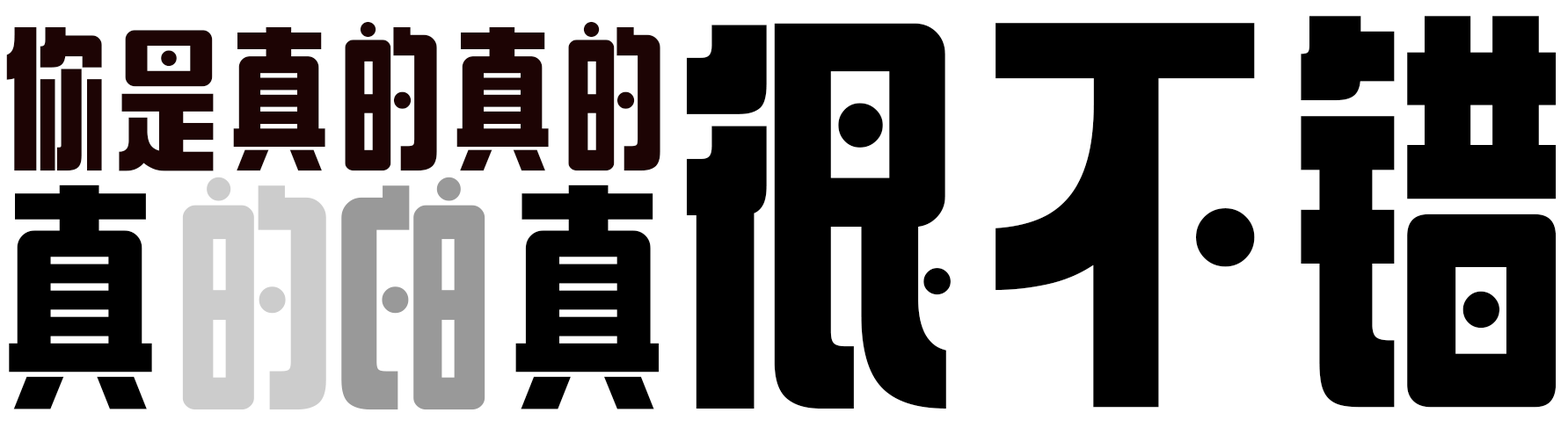
<style>
.page{position:relative;width:1568px;height:427px;background:#ffffff}
.page>*{position:absolute;margin:0}
.t1{font:498.4px "ZYFangHuaTi";color:#000000}
.t2{font:183.2px "ZYFangHuaTi";color:#1d0404}
.t3{font:285.8px "ZYFangHuaTi";color:#000000}
.t4{font:285.8px "ZYFangHuaTi";color:#cccccc}
.t5{font:285.8px "ZYFangHuaTi";color:#999999}
</style>
<div class="page">
<p class="t1" style="left:686px;top:16px;width:871px;height:393px">很不错</p>
<p class="t2" style="left:6px;top:21px;width:654px;height:150px">你是真的真的</p>
<p class="t3" style="left:9px;top:177px;width:317px;height:234px">真<span class="t4">的</span></p>
<p class="t3" style="left:341px;top:177px;width:319px;height:234px;rotate:180deg">真<span class="t5">的</span></p>
</div>
